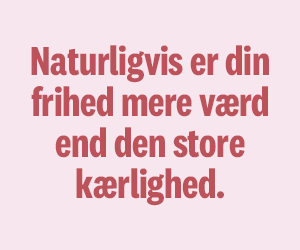
<style>
.page{position:relative;width:300px;height:250px;background:#f8e6ef}
.page>*{position:absolute;margin:0}
.t1{font:42px/41px "National2Condensed-Bold";letter-spacing:-0.008em;color:#bc535a}
</style>
<div class="page">
<p class="t1" style="left:31px;top:45px;width:238px;height:161px;text-align:center">Naturligvis er din<br>frihed mere værd<br>end den store<br>kærlighed.</p>
</div>
